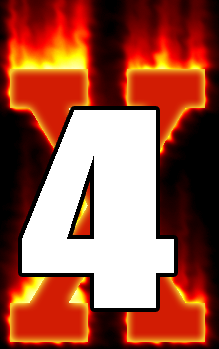
<style>
.page{position:relative;width:219px;height:349px;background:#ffffff}
.page>*{position:absolute;margin:0}
.t1{font:250px "Impact";letter-spacing:0.025em;color:#ffffff;font-variant:small-caps;scale:1.25 1}
</style>
<div class="page">
<p class="t1" style="left:22px;top:110px;width:152px;height:198px">4</p>
</div>
